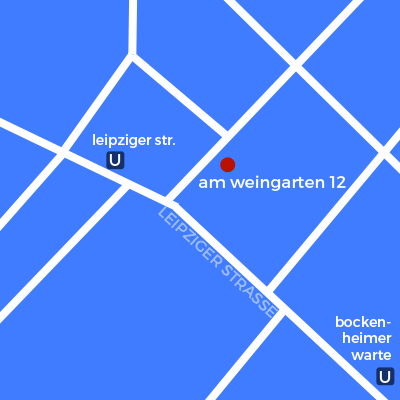
<style>
.page{position:relative;width:400px;height:400px;background:#3f7cff}
.page>*{position:absolute;margin:0}
.t1{font:13.9px "Montserrat-Regular";color:#ffffff}
.t2{font:16.7px "Montserrat-Regular";color:#ffffff}
</style>
<div class="page">
<p class="t1" style="left:93px;top:134px;width:82px;height:14px">leipziger str.</p>
<p class="t2" style="left:109px;top:154px;width:12px;height:12px">U</p>
<p class="t2" style="left:199px;top:175px;width:147px;height:16px">am weingarten 12</p>
<p class="t1" style="left:336px;top:316px;width:56px;height:44px;text-align:right">bocken-<br>heimer<br>warte</p>
<p class="t2" style="left:379px;top:371px;width:12px;height:12px">U</p>
</div>
